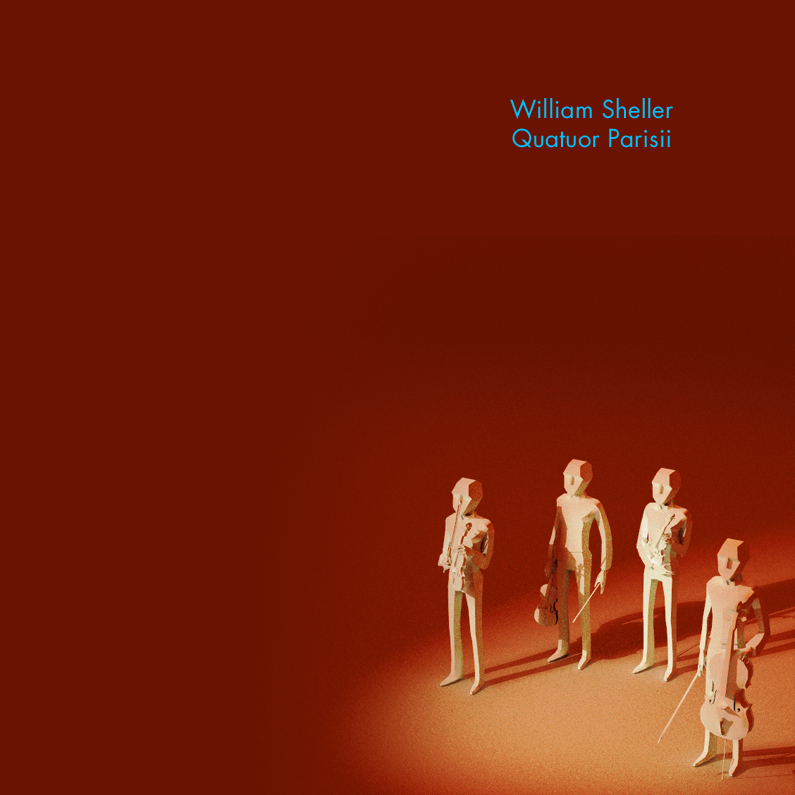
<style>
.page{position:relative;width:795px;height:795px;background:#6a1300}
.page>*{position:absolute;margin:0}
.t1{font:24.1px "Futura-Book";letter-spacing:0.01em;color:#00c0ff}
</style>
<div class="page">
<p class="t1" style="left:510px;top:98px;width:163px;height:50px;text-align:center">William Sheller<br>Quatuor Parisii</p>
</div>
